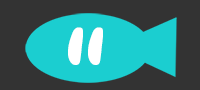
<style>
.page{position:relative;width:200px;height:90px;background:#333333}
.page>*{position:absolute;margin:0}
.t1{font:54px "porcupine";letter-spacing:0.05em;color:#ffffff}
</style>
<div class="page">
<p class="t1" style="left:68px;top:27px;width:35px;height:38px">II</p>
</div>
